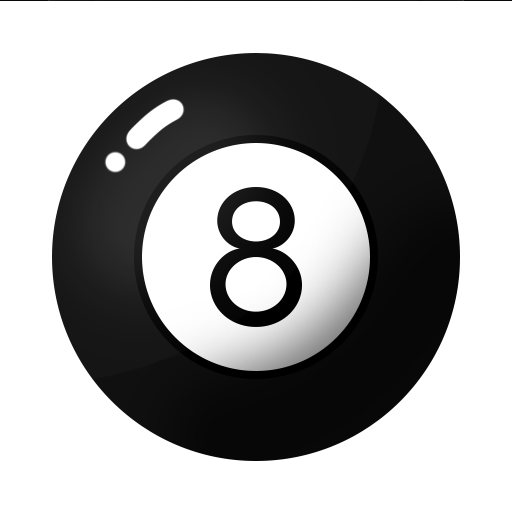
<style>
.page{position:relative;width:512px;height:512px;background:#ffffff}
.page>*{position:absolute;margin:0}
.t1{font:173px "LEMONMILK-Light";letter-spacing:0.2em;color:#000000;font-variant:small-caps}
</style>
<div class="page">
<p class="t1" style="left:210px;top:186px;width:92px;height:140px">8</p>
</div>
